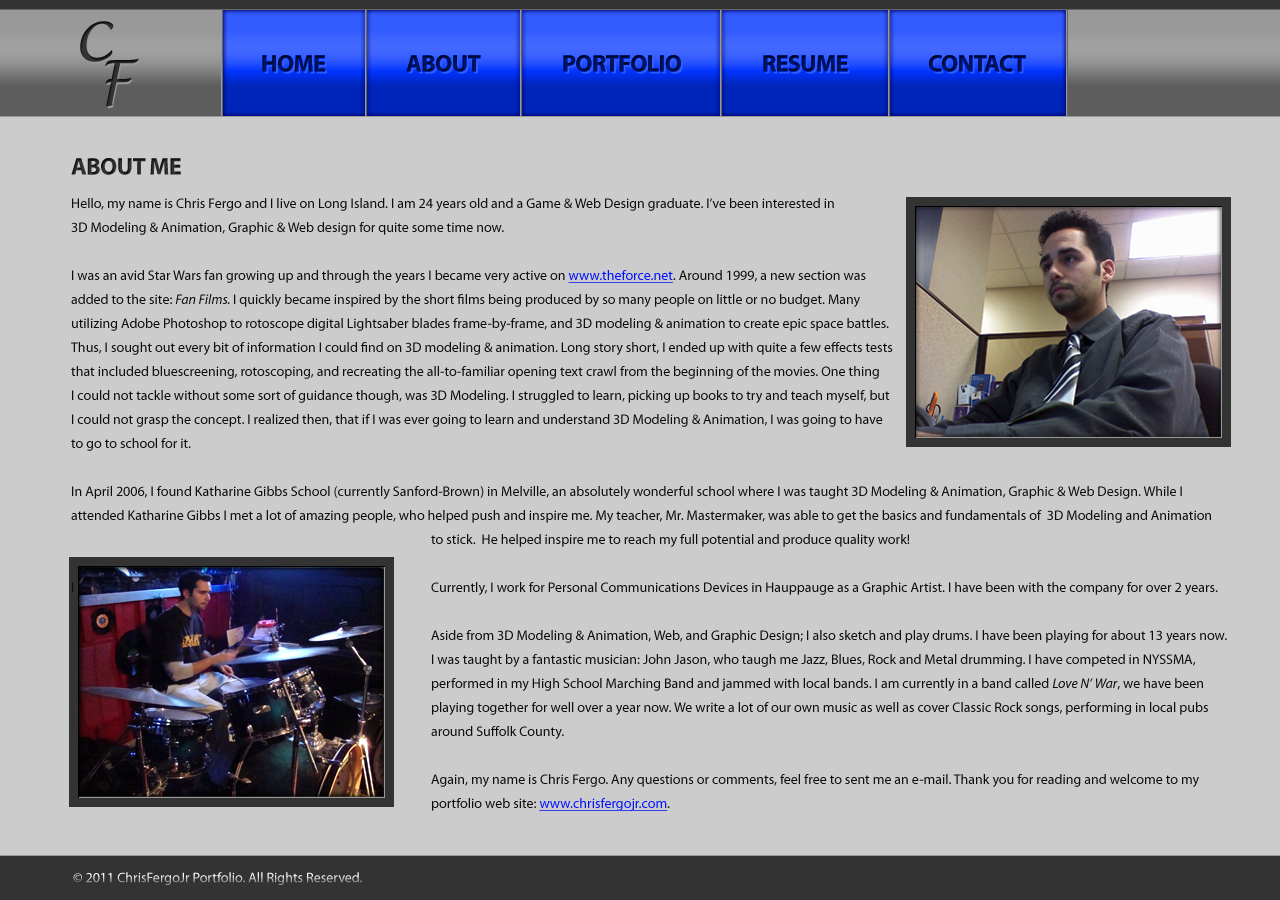
<style>
.page{position:relative;width:1280px;height:900px;background:#cccccc}
.page>*{position:absolute;margin:0}
.t1{font:24px "MyriadPro-Bold";letter-spacing:-0.025em}
.t2{font:24px "MyriadPro-Bold";letter-spacing:-0.025em;color:#282828}
.t3{font:14px/24px "MyriadPro-Regular";color:#0f0f0f}
.t4{font:14px/24px "MyriadPro-Regular";color:#0012ff;text-decoration:underline}
.t5{font:14px/24px "MyriadPro-It";color:#0f0f0f}
.t6{font:14px/24px "MyriadPro-Regular";color:#0114fe;text-decoration:underline}
.t7{font:14px "MyriadPro-Regular"}
</style>
<div class="page">
<p class="t1" style="left:262px;top:55px;width:63px;height:17px">HOME</p>
<p class="t1" style="left:406px;top:55px;width:75px;height:17px">ABOUT</p>
<p class="t1" style="left:563px;top:55px;width:118px;height:17px">PORTFOLIO</p>
<p class="t1" style="left:763px;top:55px;width:85px;height:17px">RESUME</p>
<p class="t1" style="left:929px;top:55px;width:97px;height:17px">CONTACT</p>
<p class="t2" style="left:71px;top:158px;width:110px;height:17px">ABOUT ME</p>
<p class="t3" style="left:71px;top:198px;width:1156px;height:613px;text-align:justify">Hello, my name is Chris Fergo and I live on Long Island. I am 24 years old and a Game &amp; Web Design graduate. I’ve been interested in <br>3D Modeling &amp; Animation, Graphic &amp; Web design for quite some time now. <br><br>I was an avid Star Wars fan growing up and through the years I became very active on <span class="t4">www.theforce.net</span>. Around 1999, a new section was<br>added to the site: <span class="t5">Fan Films. </span>I quickly became inspired by the short films being produced by so many people on little or no budget. Many <br>utilizing Adobe Photoshop to rotoscope digital Lightsaber blades frame-by-frame, and 3D modeling &amp; animation to create epic space battles.<br>Thus, I sought out every bit of information I could find on 3D modeling &amp; animation. Long story short, I ended up with quite a few effects tests <br>that included bluescreening, rotoscoping, and recreating the all-to-familiar opening text crawl from the beginning of the movies. One thing<br>I could not tackle without some sort of guidance though, was 3D Modeling. I struggled to learn, picking up books to try and teach myself, but<br>I could not grasp the concept. I realized then, that if I was ever going to learn and understand 3D Modeling &amp; Animation, I was going to have <br>to go to school for it.<br> <br>In April 2006, I found Katharine Gibbs School (currently Sanford-Brown) in Melville, an absolutely wonderful school where I was taught 3D Modeling &amp; Animation, Graphic &amp; Web Design. While I <br>attended Katharine Gibbs I met a lot of amazing people, who helped push and inspire me. My teacher, Mr. Mastermaker, was able to get the basics and fundamentals of  3D Modeling and Animation<br>          to stick.  He helped inspire me to reach my full potential and produce quality work!<br>          <br>I          Currently, I work for Personal Communications Devices in Hauppauge as a Graphic Artist. I have been with the company for over 2 years.<br>          <br>          Aside from 3D Modeling &amp; Animation, Web, and Graphic Design; I also sketch and play drums. I have been playing for about 13 years now.            I was taught by a fantastic musician: John Jason, who taugh me Jazz, Blues, Rock and Metal drumming. I have competed in NYSSMA, <br>          performed in my High School Marching Band and jammed with local bands. I am currently in a band called <span class="t5">Love N’ War</span>, we have been <br>          playing together for well over a year now. We write a lot of our own music as well as cover Classic Rock songs, performing in local pubs             around Suffolk County.<br><br>          Again, my name is Chris Fergo. Any questions or comments, feel free to sent me an e-mail. Thank you for reading and welcome to my<br>          portfolio web site: <span class="t6">www.chrisfergojr.com</span>.</p>
<p class="t7" style="left:73px;top:872px;width:289px;height:13px">© 2011 ChrisFergoJr Portfolio. All Rights Reserved.</p>
</div>
